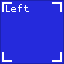
<style>
.page{position:relative;width:64px;height:64px;background:#252adc}
.page>*{position:absolute;margin:0}
.t1{font:10px "SourceCodePro-Regular";color:#ffffff}
</style>
<div class="page">
<p class="t1" style="left:6px;top:4px;width:23px;height:8px">Left</p>
</div>
